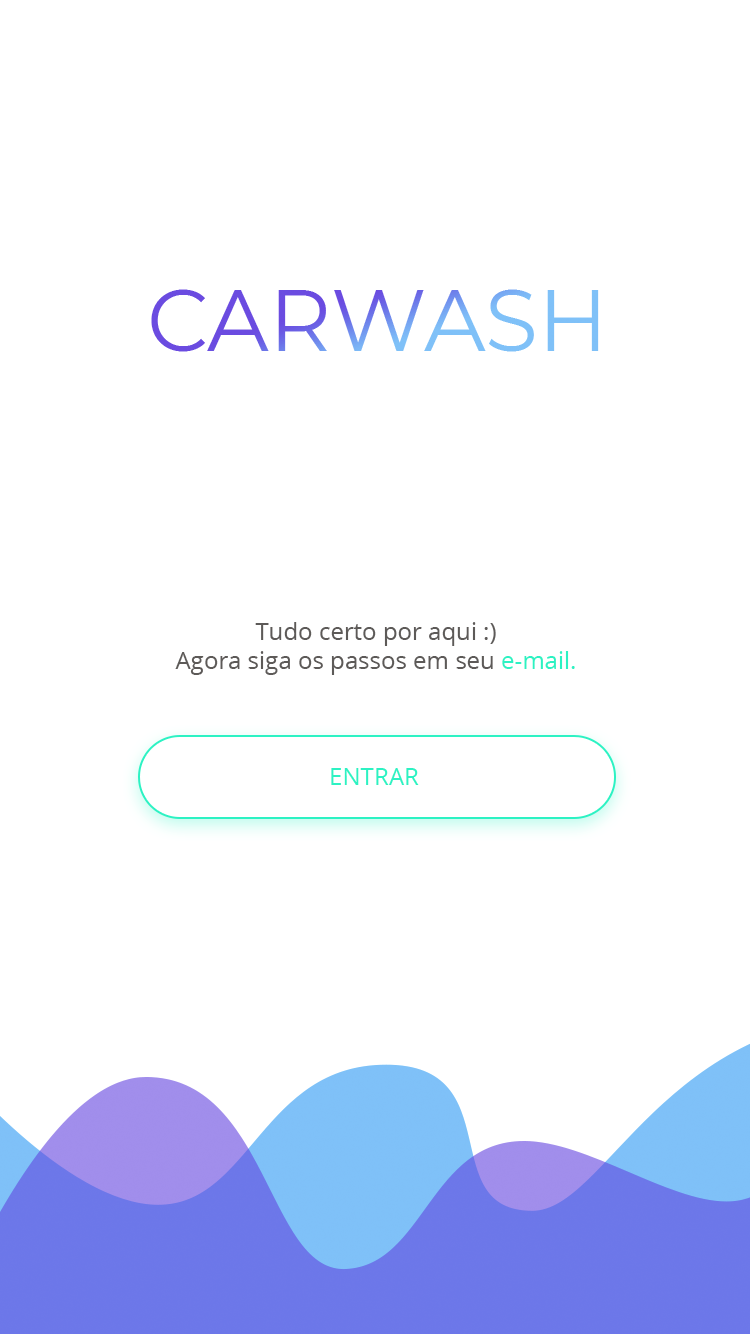
<style>
.page{position:relative;width:750px;height:1334px;background:#ffffff}
.page>*{position:absolute;margin:0}
.t1{font:24px "OpenSans";color:#5d5a58}
.t2{font:24px "OpenSans";color:#2cf2c3}
</style>
<div class="page">
<p class="t1" style="left:175px;top:622px;width:400px;height:53px;text-align:center">Tudo certo por aqui :)<br>Agora siga os passos em seu <span class="t2">e-mail.</span></p>
<p class="t2" style="left:331px;top:768px;width:88px;height:17px">ENTRAR</p>
</div>
